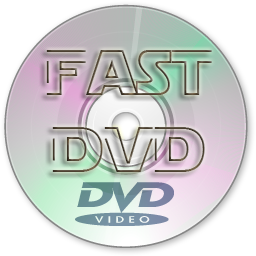
<style>
.page{position:relative;width:256px;height:256px;background:#ffffff}
.page>*{position:absolute;margin:0}
.t1{font:64px "StarJediHollow"}
</style>
<div class="page">
<p class="t1" style="left:46px;top:50px;width:166px;height:122px;text-align:center">FasT<br>DVD</p>
</div>
